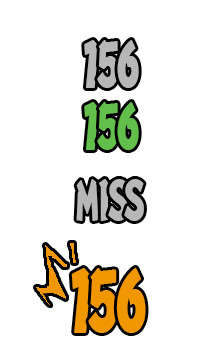
<style>
.page{position:relative;width:222px;height:359px;background:#ffffff}
.page>*{position:absolute;margin:0}
.t1{font:56.6px "NIS-EDO-RKSJ-H";letter-spacing:-0.06em;color:#b7b7b7}
.t2{font:56.6px "NIS-EDO-RKSJ-H";letter-spacing:-0.06em;color:#63bf4c}
.t3{font:49.1px "NIS-EDO-RKSJ-H";letter-spacing:-0.06em;color:#b7b7b7}
.t4{font:76.8px "NIS-EDO-RKSJ-H";letter-spacing:-0.06em;color:#f09700}
</style>
<div class="page">
<p class="t1" style="left:84px;top:40px;width:15px;height:48px">1</p>
<p class="t1" style="left:97px;top:40px;width:22px;height:48px">5</p>
<p class="t1" style="left:117px;top:40px;width:22px;height:48px">6</p>
<p class="t2" style="left:84px;top:102px;width:15px;height:48px">1</p>
<p class="t2" style="left:97px;top:102px;width:22px;height:48px">5</p>
<p class="t2" style="left:117px;top:102px;width:22px;height:48px">6</p>
<p class="t3" style="left:76px;top:179px;width:23px;height:42px">M</p>
<p class="t3" style="left:99px;top:179px;width:9px;height:42px">I</p>
<p class="t3" style="left:108px;top:179px;width:20px;height:42px">S</p>
<p class="t3" style="left:124px;top:179px;width:20px;height:42px">S</p>
<p class="t4" style="left:71px;top:268px;width:20px;height:65px">1</p>
<p class="t4" style="left:88px;top:268px;width:30px;height:65px">5</p>
<p class="t4" style="left:116px;top:268px;width:30px;height:65px">6</p>
</div>
